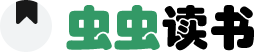
<style>
.page{position:relative;width:266px;height:56px;background:#ffffff}
.page>*{position:absolute;margin:0}
.t1{font:48px "STHupo";color:#339966}
.t2{font:48px "STHupo";color:#000000}
</style>
<div class="page">
<p class="t1" style="left:66px;top:5px;width:188px;height:46px">虫虫<span class="t2">读书</span></p>
</div>
